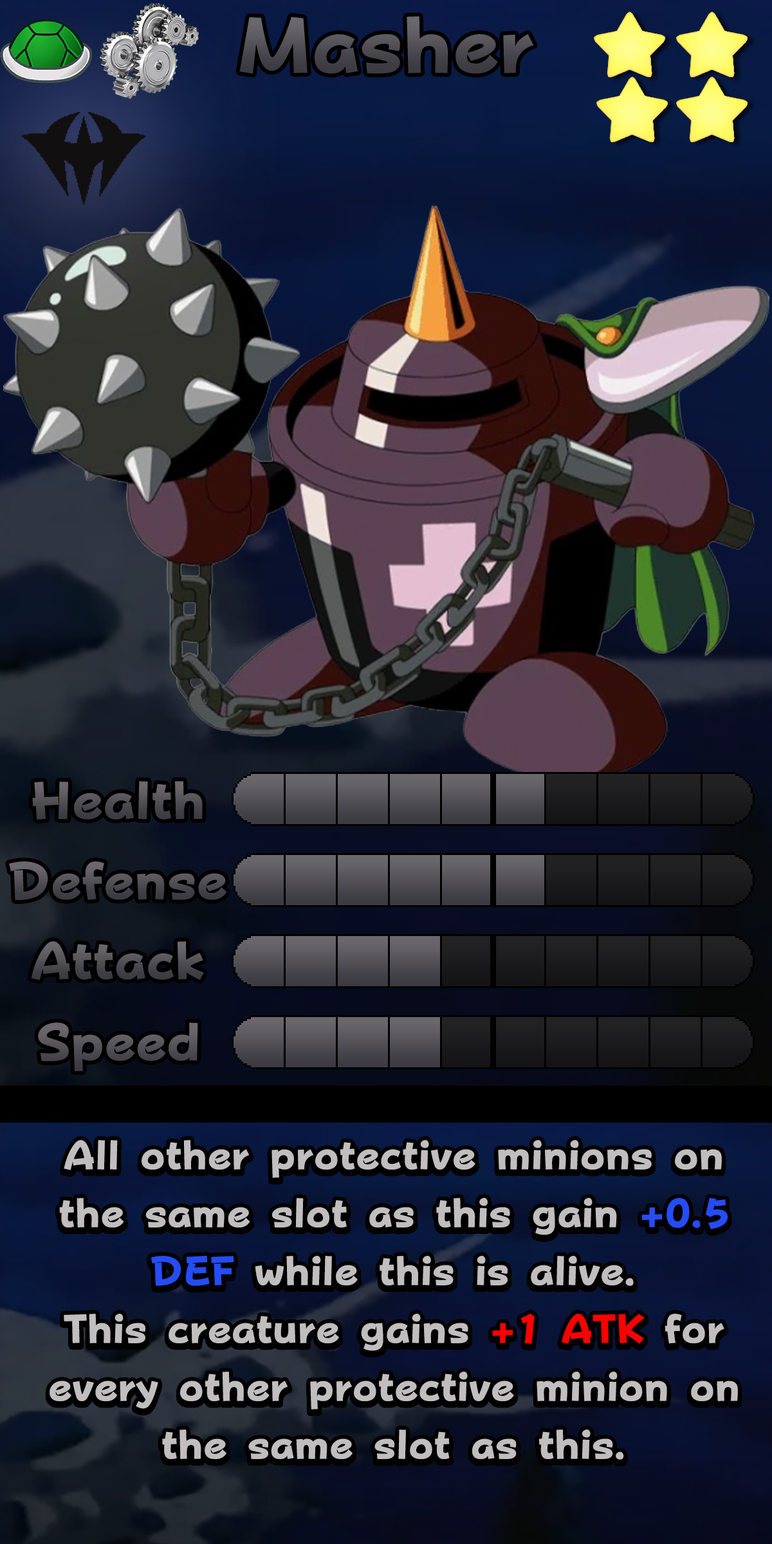
<style>
.page{position:relative;width:772px;height:1544px}
.page>*{position:absolute;margin:0}
.t1{font:135.1px "FOTPopHappinessStrp-ExtraBold";color:#4b4a50}
.t2{font:90.1px "FOTPopHappinessStrp-ExtraBold";color:#4e4d53}
.t3{font:90.1px "FOTPopHappinessStrp-ExtraBold";color:#4d4c52}
.t4{font:90.1px "FOTPopHappinessStrp-ExtraBold";color:#545258}
.t5{font:69.5px/57.9px "FOTPopHappinessStrp-ExtraBold";color:#c1bebf}
.t6{font:69.5px/57.9px "FOTPopHappinessStrp-ExtraBold";color:#254cf6}
.t7{font:69.5px/57.9px "FOTPopHappinessStrp-ExtraBold";color:#ff0000}
</style>
<div class="page">
<p class="t1" style="left:239px;top:16px;width:295px;height:58px">Masher</p>
<p class="t2" style="left:32px;top:781px;width:171px;height:39px">Health</p>
<p class="t3" style="left:9px;top:862px;width:218px;height:38px">Defense</p>
<p class="t3" style="left:31px;top:941px;width:173px;height:40px">Attack</p>
<p class="t4" style="left:38px;top:1022px;width:160px;height:49px">Speed</p>
<p class="t5" style="left:50px;top:1140px;width:688px;height:320px;text-align:center">All other protective minions on the same slot as this gain <span class="t6">+0.5 DEF</span> while this is alive.<br>This creature gains <span class="t7">+1 ATK </span>for every other protective minion on the same slot as this.</p>
</div>
